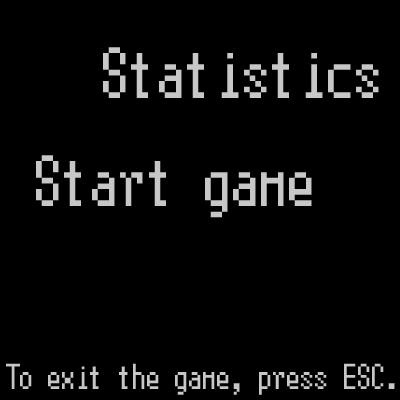
<style>
.page{position:relative;width:400px;height:400px;background:#000000}
.page>*{position:absolute;margin:0}
.t1{font:72px "Terminal";color:#c7c7c7}
.t2{font:36px "Terminal";color:#c7c7c7}
</style>
<div class="page">
<p class="t1" style="left:103px;top:47px;width:276px;height:51px">Statistics</p>
<p class="t1" style="left:36px;top:155px;width:276px;height:63px">Start game</p>
<p class="t2" style="left:6px;top:363px;width:389px;height:32px">To exit the game, press ESC.</p>
</div>
